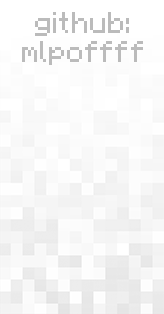
<style>
.page{position:relative;width:164px;height:314px}
.page>*{position:absolute;margin:0}
.t1{font:24.2px "Minecraft";color:#bbbbbb}
</style>
<div class="page">
<p class="t1" style="left:22px;top:12px;width:121px;height:53px;text-align:center">github:<br>mlpoffff</p>
</div>
